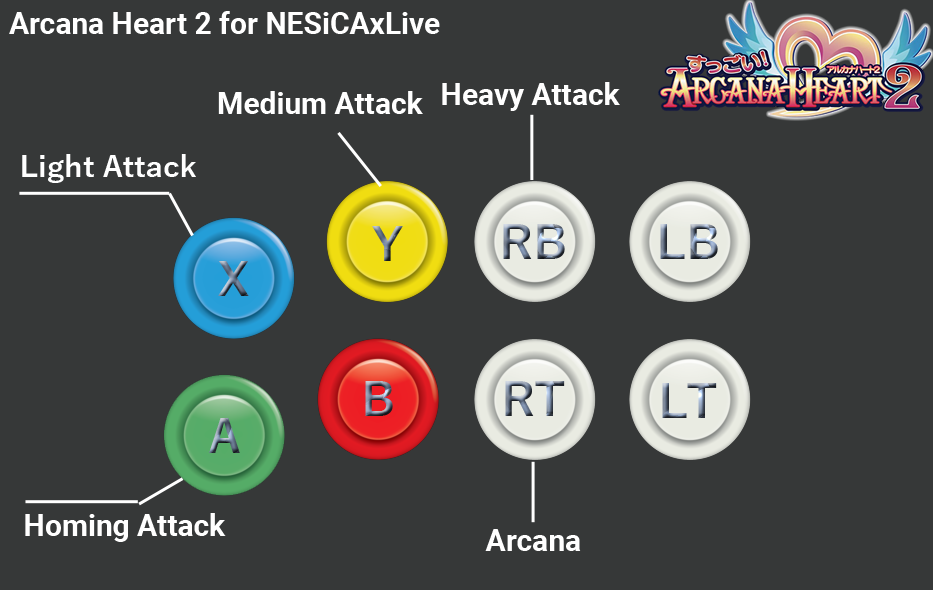
<style>
.page{position:relative;width:933px;height:590px;background:#363838}
.page>*{position:absolute;margin:0}
.t1{font:30px "Roboto-Bold";color:#ffffff}
.t2{font:30px "YuGothic-Bold";color:#ffffff}
</style>
<div class="page">
<p class="t1" style="left:9px;top:11px;width:431px;height:23px">Arcana Heart 2 for NESiCAxLive</p>
<p class="t1" style="left:442px;top:82px;width:178px;height:29px">Heavy Attack</p>
<p class="t1" style="left:218px;top:91px;width:205px;height:23px">Medium Attack</p>
<p class="t2" style="left:22px;top:154px;width:174px;height:29px">Light Attack</p>
<p class="t1" style="left:25px;top:513px;width:201px;height:29px">Homing Attack</p>
<p class="t1" style="left:485px;top:529px;width:96px;height:22px">Arcana</p>
</div>
